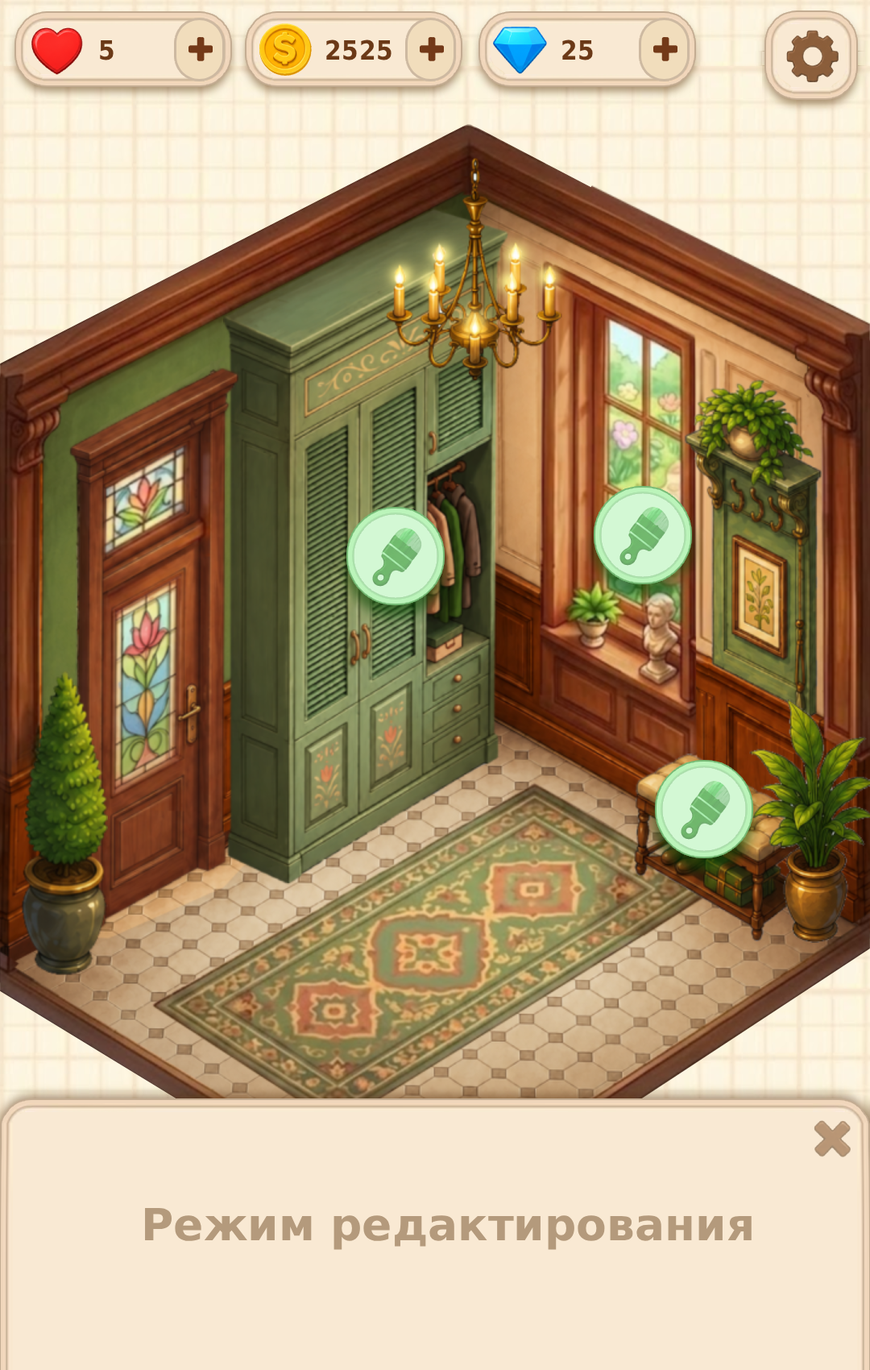
<style>
.page{position:relative;width:870px;height:1370px}
.page>*{position:absolute;margin:0}
.t1{font:44.3px "DejaVuSans-Bold";color:#b49a7c}
</style>
<div class="page">
<p class="t1" style="left:145px;top:1207px;width:607px;height:43px">Режим редактирования</p>
</div>
